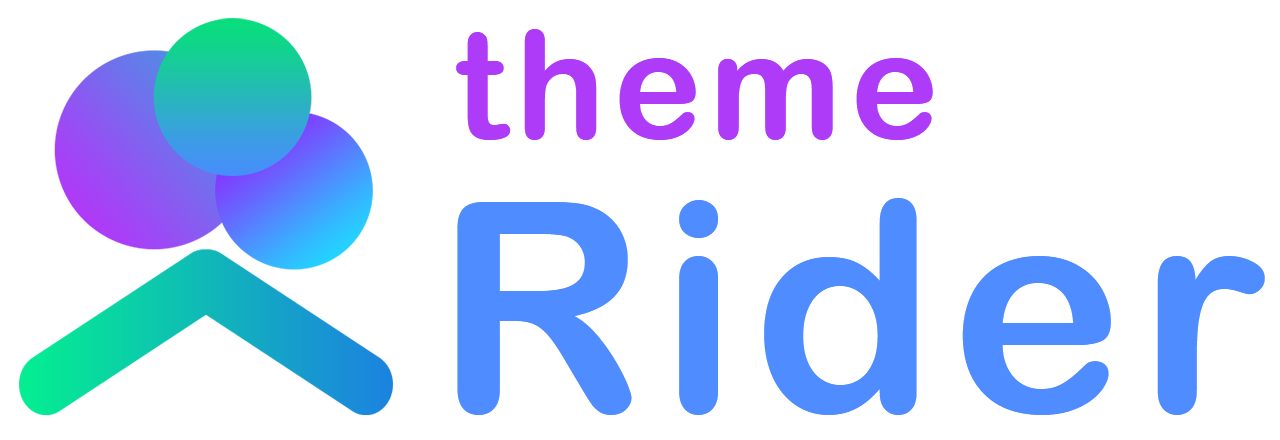
<style>
.page{position:relative;width:1280px;height:440px;background:#ffffff}
.page>*{position:absolute;margin:0}
.t1{font:150px "ArialRoundedMTBold";letter-spacing:0.05em;color:#ad3bf8}
.t2{font:291.7px "ArialRoundedMTBold";letter-spacing:0.05em;color:#4f8cff}
</style>
<div class="page">
<p class="t1" style="left:456px;top:29px;width:477px;height:111px">theme</p>
<p class="t2" style="left:457px;top:198px;width:808px;height:217px">Rider</p>
</div>
